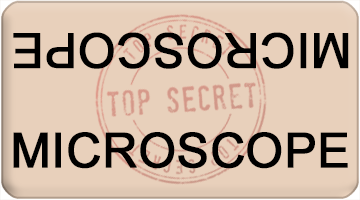
<style>
.page{position:relative;width:360px;height:200px;background:#e8d0bb}
.page>*{position:absolute;margin:0}
.t1{font:48px "ArialMT";color:#000000;font-weight:bold}
</style>
<div class="page">
<p class="t1" style="left:13px;top:32px;width:336px;height:37px;rotate:180deg">MICROSCOPE</p>
<p class="t1" style="left:13px;top:132px;width:335px;height:37px">MICROSCOPE</p>
</div>
